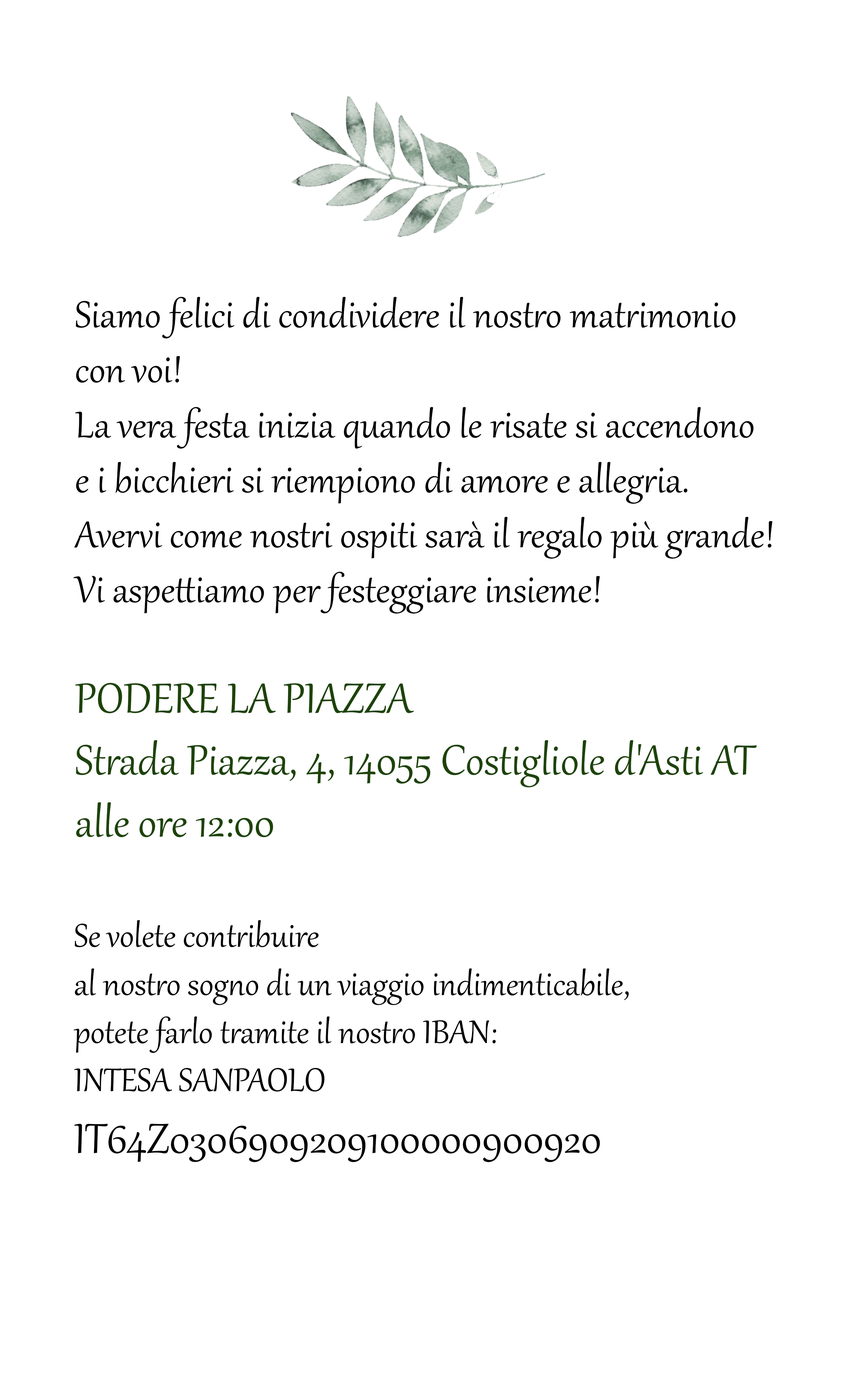
<style>
.page{position:relative;width:863px;height:1381px;background:#ffffff}
.page>*{position:absolute;margin:0}
.t1{font:45.8px "Gabriola";color:#000000}
.t2{font:51.5px "Gabriola";color:#1d4309}
.t3{font:40.1px "Gabriola";color:#000000}
.t4{font:51.5px "Gabriola";color:#000000}
</style>
<div class="page">
<p class="t1" style="left:73px;top:297px;width:700px;height:317px">Siamo felici di condividere il nostro matrimonio <br>con voi!<br>La vera festa inizia quando le risate si accendono<br>e i bicchieri si riempiono di amore e allegria.<br>Avervi come nostri ospiti sarà il regalo più grande!<br>Vi aspettiamo per festeggiare insieme!</p>
<p class="t2" style="left:75px;top:683px;width:682px;height:155px">PODERE LA PIAZZA<br>Strada Piazza, 4, 14055 Costigliole d'Asti AT<br>alle ore 12:00</p>
<p class="t3" style="left:73px;top:920px;width:556px;height:243px">Se volete contribuire <br>al nostro sogno di un viaggio indimenticabile, <br>potete farlo tramite il nostro IBAN: <br>INTESA SANPAOLO<br><span class="t4">IT64Z0306909209100000900920</span></p>
</div>
